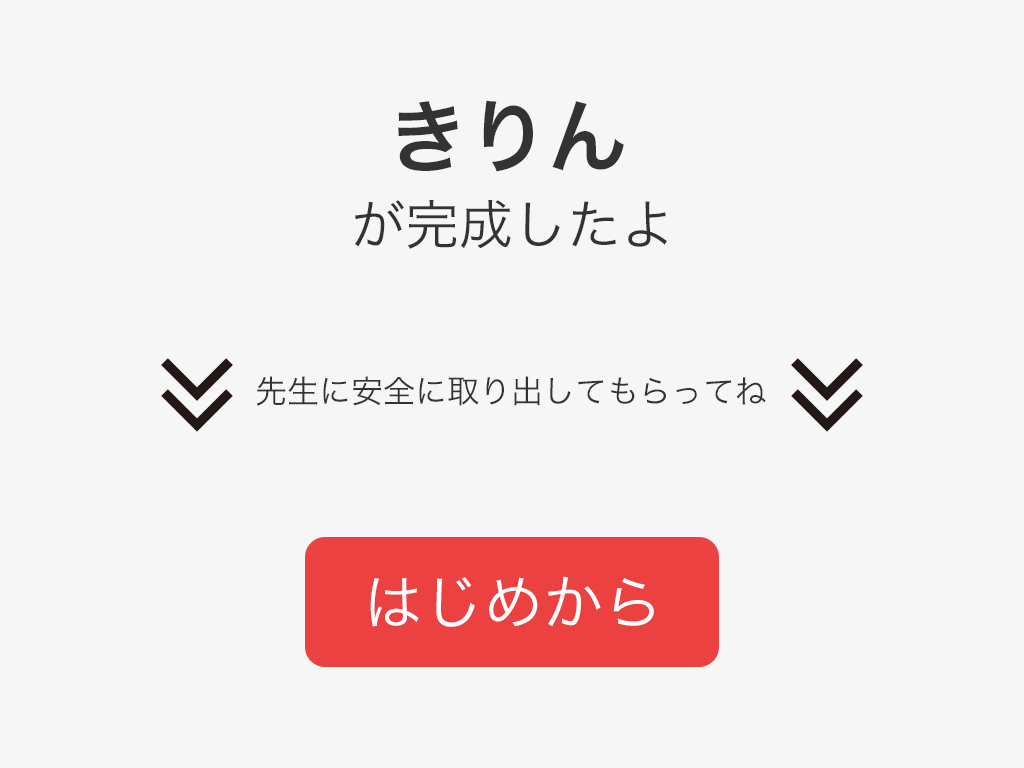
<style>
.page{position:relative;width:1024px;height:768px;background:#f6f6f6}
.page>*{position:absolute;margin:0}
.t1{font:80px "HiraKakuPro-W6";color:#333333}
.t2{font:54px "HiraKakuPro-W3";color:#333333}
.t3{font:32px "HiraKakuPro-W3";color:#333333}
.t4{font:60px "HiraKakuPro-W3";color:#ffffff}
</style>
<div class="page">
<p class="t1" style="left:398px;top:101px;width:226px;height:71px">きりん</p>
<p class="t2" style="left:355px;top:200px;width:312px;height:49px">が完成したよ</p>
<p class="t3" style="left:256px;top:376px;width:510px;height:30px">先生に安全に取り出してもらってね</p>
<p class="t4" style="left:370px;top:576px;width:284px;height:51px">はじめから</p>
</div>
